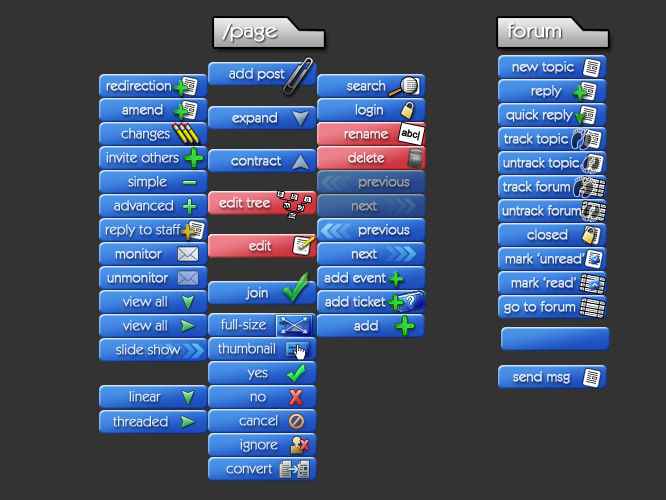
<style>
.page{position:relative;width:666px;height:500px;background:#333333}
.page>*{position:absolute;margin:0}
.t1{font:20px "KabelITCbyBT-Book";color:#ffffff;font-weight:bold;scale:1.09 1}
.t2{font:14px "KabelITCbyBT-Book";color:#d7e4f7;font-weight:bold}
.t3{font:14px "KabelITCbyBT-Book";font-weight:bold}
.t4{font:14px "KabelITCbyBT-Book";color:#d6e3f7;font-weight:bold}
.t5{font:14px "KabelITCbyBT-Book";color:#d7e3f7;font-weight:bold}
.t6{font:14px "KabelITCbyBT-Book";color:#d6e3f6;font-weight:bold}
.t7{font:14px "KabelITCbyBT-Book";color:#f8dfe1;font-weight:bold}
.t8{font:9.4px "ArialMT";color:#000000;font-weight:bold}
.t9{font:14px "KabelITCbyBT-Book";color:#f8dfe2;font-weight:bold;scale:0.94 1}
.t10{font:14px "KabelITCbyBT-Book";color:#d7e3f7;font-weight:bold;scale:0.97 1}
.t11{font:14px "KabelITCbyBT-Book";color:#959ca8;font-weight:bold}
.t12{font:14px "KabelITCbyBT-Book";color:#d8e5f8;font-weight:bold}
.t13{font:14px "KabelITCbyBT-Book";color:#f9e1e3;font-weight:bold}
.t14{font:14px "KabelITCbyBT-Book";color:#969ea9;font-weight:bold}
.t15{font:14px "KabelITCbyBT-Book";color:#d7e4f7;font-weight:bold;scale:0.97 1}
.t16{font:14px "KabelITCbyBT-Book";color:#d5e1f5;font-weight:bold}
.t17{font:14px "KabelITCbyBT-Book";color:#d6e2f6;font-weight:bold}
.t18{font:14px "KabelITCbyBT-Book";color:#f8dfe1;font-weight:bold;scale:0.94 1}
.t19{font:14px "KabelITCbyBT-Book";color:#d7e4f8;font-weight:bold}
.t20{font:14px "KabelITCbyBT-Book";color:#d8e6f8;font-weight:bold}
.t21{font:19px "Arial-BoldMT";font-weight:bold}
.t22{font:14px "KabelITCbyBT-Book";color:#d8e4f8;font-weight:bold}
.t23{font:12.2px "Arial-BoldMT";font-weight:bold}
</style>
<div class="page">
<p class="t1" style="left:222px;top:23px;width:55px;height:19px">/page</p>
<p class="t1" style="left:507px;top:23px;width:54px;height:15px">forum</p>
<p class="t2" style="left:512px;top:61px;width:62px;height:13px">new topic</p>
<p class="t3" style="left:227px;top:69px;width:58px;height:12px">new post</p>
<p class="t2" style="left:106px;top:80px;width:65px;height:11px">redirection</p>
<p class="t4" style="left:347px;top:80px;width:39px;height:11px">search</p>
<p class="t5" style="left:531px;top:85px;width:31px;height:13px">reply</p>
<p class="t2" style="left:122px;top:104px;width:41px;height:11px">amend</p>
<p class="t4" style="left:232px;top:112px;width:45px;height:13px">expand</p>
<p class="t6" style="left:355px;top:104px;width:28px;height:13px">login</p>
<p class="t2" style="left:506px;top:109px;width:67px;height:13px">quick reply</p>
<p class="t4" style="left:121px;top:128px;width:49px;height:13px">changes</p>
<p class="t7" style="left:344px;top:131px;width:44px;height:8px">rename</p>
<p class="t8" style="left:401px;top:129px;width:20px;height:12px;rotate:12deg">abc|</p>
<p class="t2" style="left:504px;top:133px;width:64px;height:13px">track topic</p>
<p class="t2" style="left:106px;top:152px;width:73px;height:11px">invite others</p>
<p class="t4" style="left:231px;top:156px;width:50px;height:10px">contract</p>
<p class="t9" style="left:348px;top:152px;width:36px;height:11px">delete</p>
<p class="t10" style="left:503px;top:157px;width:76px;height:13px">untrack topic</p>
<p class="t4" style="left:128px;top:176px;width:39px;height:13px">simple</p>
<p class="t11" style="left:358px;top:176px;width:52px;height:13px">previous</p>
<p class="t12" style="left:503px;top:181px;width:67px;height:11px">track forum</p>
<p class="t13" style="left:219px;top:197px;width:51px;height:11px">edit tree</p>
<p class="t2" style="left:114px;top:200px;width:59px;height:11px">advanced</p>
<p class="t14" style="left:351px;top:201px;width:26px;height:10px">next</p>
<p class="t15" style="left:502px;top:205px;width:79px;height:11px">untrack forum</p>
<p class="t2" style="left:105px;top:224px;width:76px;height:13px">reply to staff</p>
<p class="t16" style="left:358px;top:224px;width:52px;height:13px">previous</p>
<p class="t17" style="left:527px;top:229px;width:41px;height:11px">closed</p>
<p class="t18" style="left:249px;top:240px;width:22px;height:11px">edit</p>
<p class="t19" style="left:115px;top:248px;width:47px;height:11px">monitor</p>
<p class="t2" style="left:351px;top:249px;width:26px;height:10px">next</p>
<p class="t6" style="left:505px;top:253px;width:80px;height:11px">mark ‘unread’</p>
<p class="t2" style="left:107px;top:272px;width:62px;height:11px">unmonitor</p>
<p class="t19" style="left:324px;top:272px;width:62px;height:11px">add event</p>
<p class="t5" style="left:511px;top:277px;width:65px;height:11px">mark ‘read’</p>
<p class="t5" style="left:245px;top:287px;width:23px;height:13px">join</p>
<p class="t2" style="left:122px;top:296px;width:45px;height:11px">view all</p>
<p class="t2" style="left:325px;top:296px;width:61px;height:11px">add ticket</p>
<p class="t2" style="left:504px;top:301px;width:72px;height:13px">go to forum</p>
<p class="t2" style="left:122px;top:320px;width:45px;height:11px">view all</p>
<p class="t20" style="left:221px;top:319px;width:45px;height:11px">full-size</p>
<p class="t4" style="left:354px;top:320px;width:24px;height:11px">add</p>
<p class="t12" style="left:116px;top:344px;width:65px;height:11px">slide show</p>
<p class="t2" style="left:218px;top:343px;width:57px;height:11px">thumbnail</p>
<p class="t5" style="left:247px;top:369px;width:21px;height:11px">yes</p>
<p class="t2" style="left:513px;top:371px;width:57px;height:13px">send msg</p>
<p class="t21" style="left:289px;top:390px;width:14px;height:15px">X</p>
<p class="t5" style="left:129px;top:391px;width:32px;height:11px">linear</p>
<p class="t4" style="left:250px;top:393px;width:16px;height:9px">no</p>
<p class="t22" style="left:113px;top:416px;width:55px;height:11px">threaded</p>
<p class="t17" style="left:239px;top:415px;width:39px;height:11px">cancel</p>
<p class="t5" style="left:240px;top:439px;width:38px;height:13px">ignore</p>
<p class="t23" style="left:300px;top:440px;width:9px;height:10px">X</p>
<p class="t2" style="left:226px;top:464px;width:47px;height:10px">convert</p>
</div>
